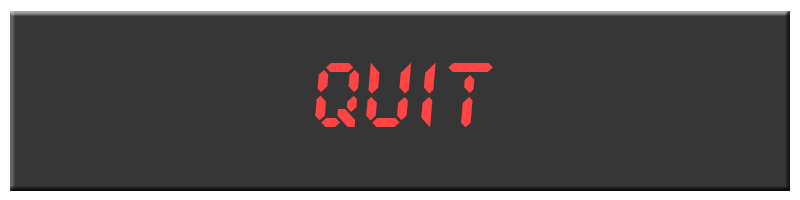
<style>
.page{position:relative;width:800px;height:200px;background:#363636}
.page>*{position:absolute;margin:0}
.t1{font:100px "LetsgoDigital-Regular";color:#ff4444}
</style>
<div class="page">
<p class="t1" style="left:315px;top:63px;width:178px;height:64px">QUIT</p>
</div>
